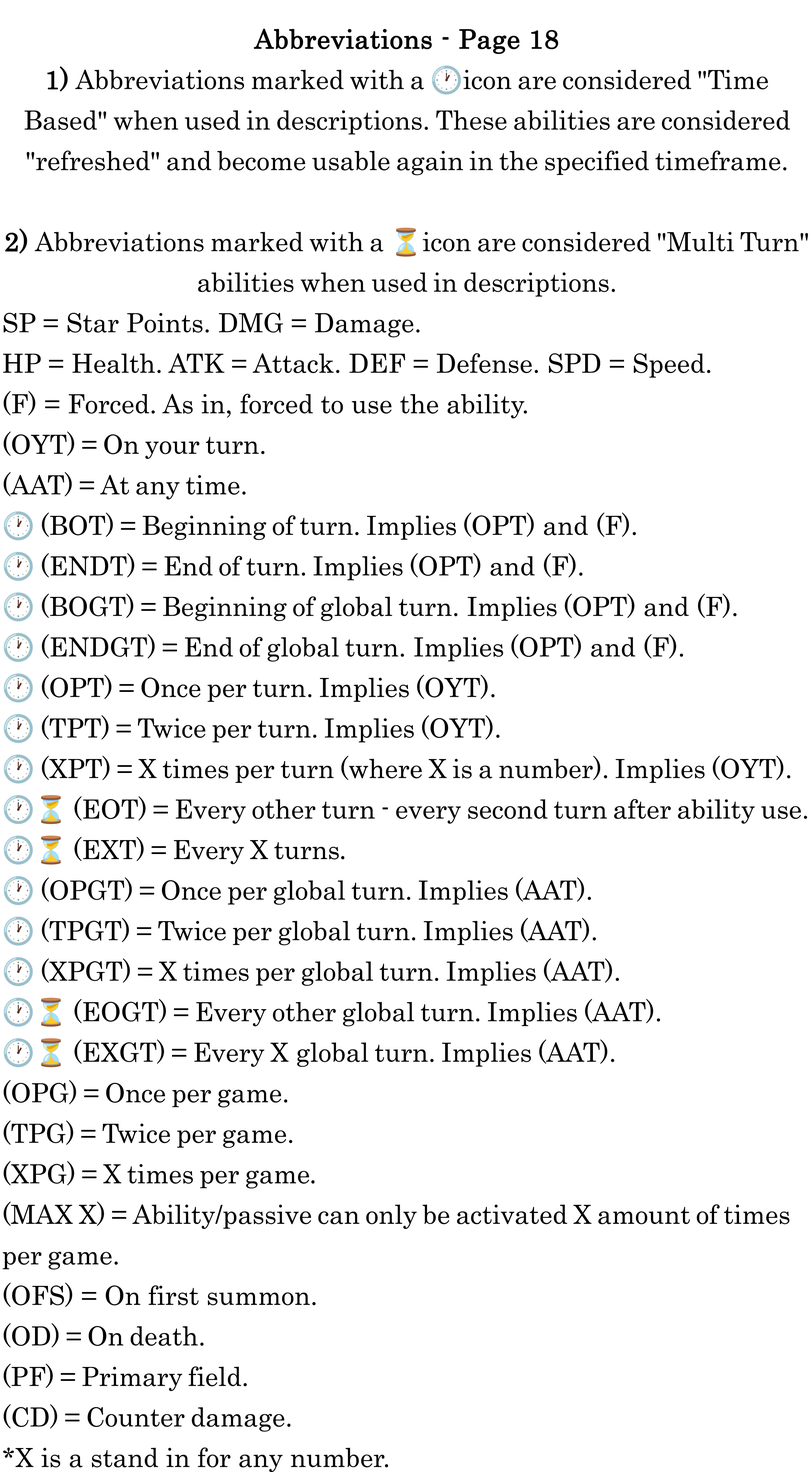
<style>
.page{position:relative;width:810px;height:1472px;background:#ffffff}
.page>*{position:absolute;margin:0}
.t1{font:45px/40.5px "Century";color:#000000}
.t2{font:45px/40.5px "Century";color:#000000;font-weight:bold}
.t3{font:45px/40.5px "NotoColorEmoji-SVG";color:#000000}
.t4{font:45px/40.5px "MyriadPro-Regular";color:#000000}
</style>
<div class="page">
<p class="t1" style="left:3px;top:29px;width:805px;height:1443px;text-align:center"><span class="t2">Abbreviations - Page 18<br>1)</span> Abbreviations marked with a <span class="t3">🕐</span>icon are considered "Time Based" when used in descriptions. These abilities are considered "refreshed" and become usable again in the specified timeframe.<br><br><span class="t2">2)</span> Abbreviations marked with a <span class="t3">⏳</span>icon are considered "Multi Turn" abilities when used in descriptions.<br>SP = Star Points. DMG = Damage.<br>HP = Health. ATK = Attack. DEF = Defense. SPD = Speed.<br>(F) = Forced. As in, forced to use the ability.<br>(OYT) = On your turn.<br>(AAT) = At any time.<br><span class="t3">🕐 </span>(BOT) = Beginning of turn. Implies (OPT) and (F).<br><span class="t3">🕐 </span>(ENDT) = End of turn. Implies (OPT) and (F).<br><span class="t3">🕐 </span>(BOGT) = Beginning of global turn. Implies (OPT) and (F).<br><span class="t3">🕐 </span>(ENDGT) = End of global turn. Implies (OPT) and (F).<br><span class="t3">🕐 </span>(OPT) = Once per turn. Implies (OYT).<br><span class="t3">🕐 </span>(TPT) = Twice per turn. Implies (OYT).<br><span class="t3">🕐 </span>(XPT) = X times per turn (where X is a number). Implies (OYT).<br><span class="t3">🕐⏳ </span>(EOT) = Every other turn - every second turn after ability use.<br><span class="t3">🕐⏳ </span>(EXT) = Every X turns<span class="t4">.<br></span><span class="t3">🕐 </span>(OPGT) = Once per global turn. Implies (AAT).<br><span class="t3">🕐 </span>(TPGT) = Twice per global turn. Implies (AAT).<br><span class="t3">🕐 </span>(XPGT) = X times per global turn. Implies (AAT).<br><span class="t3">🕐⏳ </span>(EOGT) = Every other global turn. Implies (AAT).<br><span class="t3">🕐⏳ </span>(EXGT) = Every X global turn. Implies (AAT).<br>(OPG) = Once per game.<br>(TPG) = Twice per game.<br>(XPG) = X times per game<span class="t4">.<br></span>(MAX X) = Ability/passive can only be activated X amount of times per game.<br>(OFS) = On first summon.<br>(OD) = On death.<br>(PF) = Primary field.<br>(CD) = Counter damage.<br>*X is a stand in for any number.</p>
</div>
